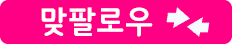
<style>
.page{position:relative;width:232px;height:44px;background:#ff0084}
.page>*{position:absolute;margin:0}
.t1{font:32px "12LotteMartDreamBold";letter-spacing:0.05em;color:#ffffff;text-transform:uppercase;scale:0.95 1}
</style>
<div class="page">
<p class="t1" style="left:41px;top:7px;width:112px;height:30px">맞팔로우</p>
</div>
